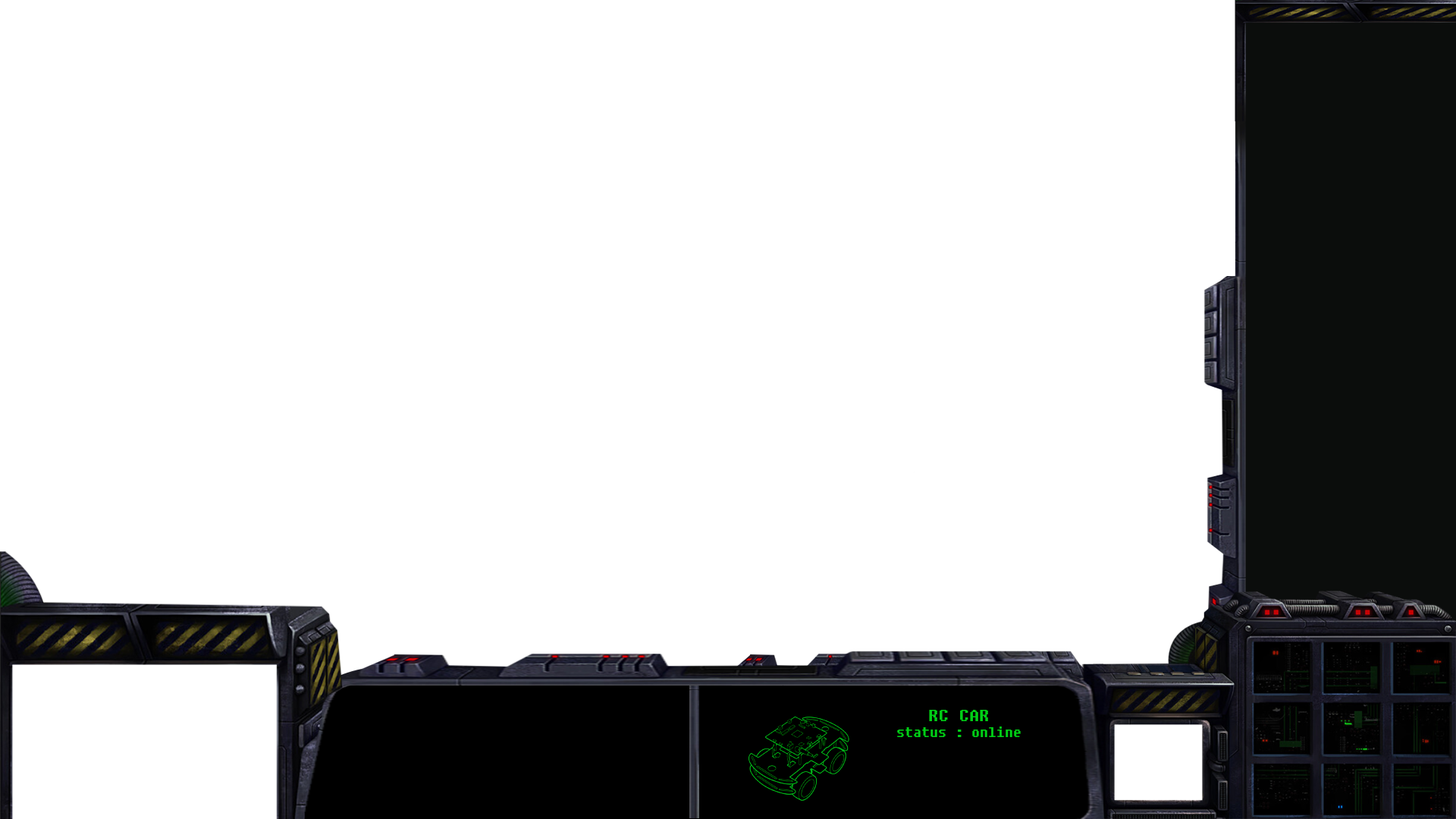
<style>
.page{position:relative;width:1456px;height:819px;background:#ffffff}
.page>*{position:absolute;margin:0}
.t1{font:20.3px "DungGeunMo";color:#00cf17}
.t2{font:16.7px "DungGeunMo";color:#00cf17}
</style>
<div class="page">
<p class="t1" style="left:929px;top:710px;width:59px;height:11px">RC CAR</p>
<p class="t2" style="left:897px;top:726px;width:124px;height:11px">status : online</p>
</div>
